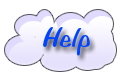
<style>
.page{position:relative;width:120px;height:80px;background:#ffffff}
.page>*{position:absolute;margin:0}
.t1{font:30px "BiffoMTStd";color:#0144ff}
</style>
<div class="page">
<p class="t1" style="left:43px;top:27px;width:47px;height:29px">Help</p>
</div>
